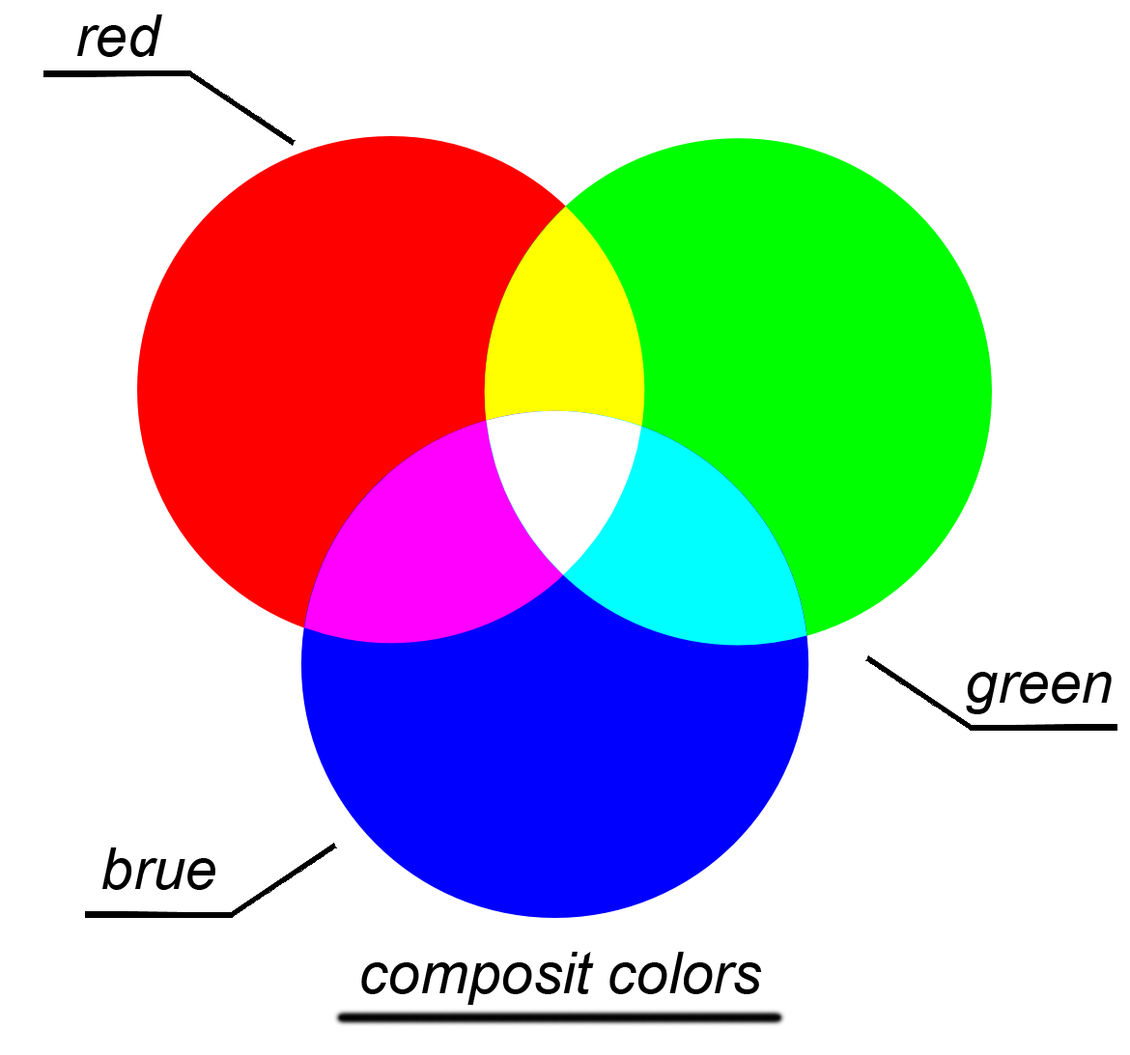
<style>
.page{position:relative;width:1130px;height:1055px;background:#ffffff}
.page>*{position:absolute;margin:0}
.t1{font:57.9px "Arial-ItalicMT";color:#000000}
</style>
<div class="page">
<p class="t1" style="left:77px;top:14px;width:85px;height:43px">red</p>
<p class="t1" style="left:966px;top:672px;width:145px;height:43px">green</p>
<p class="t1" style="left:102px;top:848px;width:113px;height:42px">brue</p>
<p class="t1" style="left:361px;top:952px;width:401px;height:53px">composit colors</p>
</div>
